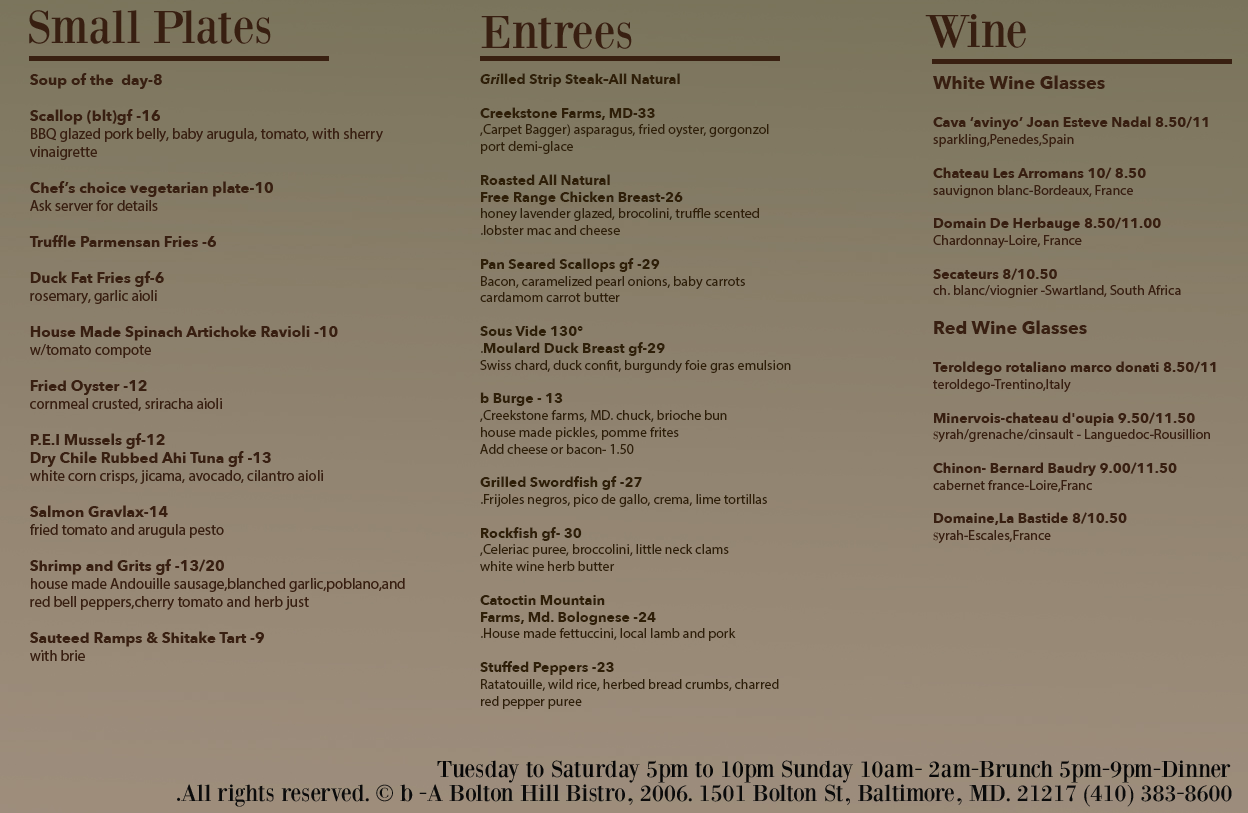
<style>
.page{position:relative;width:1248px;height:813px}
.page>*{position:absolute;margin:0}
.t1{font:48px "BodoniXT";color:#381f11}
.t2{font:15px "MyriadPro-Regular";color:#381f11}
.t3{font:15px "AvenirNext-Bold";color:#381f11}
.t4{font:14px "MyriadPro-Regular";color:#2f1f08}
.t5{font:14px "AvenirNext-BoldItalic";color:#2f1f08}
.t6{font:14px "AvenirNext-Bold";color:#2f1f08}
.t7{font:14px "MyriadPro-Regular";color:#381f11}
.t8{font:18px "AvenirNext-Bold";color:#381f11}
.t9{font:14px "AvenirNext-Bold";color:#381f11}
.t10{font:14px "BodoniXT";color:#381f11}
.t11{font:24px "BodoniXT";color:#070707}
.t12{font:24px "BodoniXT";color:#0b0b0b}
.t13{font:24px "MyriadPro-Regular";color:#0b0b0b}
</style>
<div class="page">
<p class="t1" style="left:29px;top:10px;width:242px;height:34px">Small Plates</p>
<p class="t1" style="left:481px;top:16px;width:151px;height:33px">Entrees</p>
<p class="t1" style="left:925px;top:14px;width:101px;height:34px">Wine</p>
<p class="t2" style="left:29px;top:73px;width:376px;height:588px;text-align:right"><span class="t3">Soup of the  day-8<br><br>Scallop (blt)gf -16</span> <br>BBQ glazed pork belly, baby arugula, tomato, with sherry <br>vinaigrette<br><br><span class="t3">Chef’s choice vegetarian plate-10</span> <br>Ask server for details<br> <br><span class="t3">Truffle Parmensan Fries -6<br> <br>Duck Fat Fries gf-6</span>  <br>rosemary, garlic aioli<br><br><span class="t3">House Made Spinach Artichoke Ravioli -10<br></span>w/tomato compote<br><br><span class="t3">Fried Oyster -12</span> <br>cornmeal crusted, sriracha aioli<br><br><span class="t3">P.E.I Mussels gf-12<br>Dry Chile Rubbed Ahi Tuna gf -13</span> <br>white corn crisps, jicama, avocado, cilantro aioli<br><span class="t3"><br>Salmon Gravlax-14</span> <br> fried tomato and arugula pesto<br><br><span class="t3">Shrimp and Grits gf -13/20<br></span>house made Andouille sausage,blanched garlic,poblano,and red bell peppers,cherry tomato and herb just<br><span class="t3"><br>Sauteed Ramps &amp; Shitake Tart -9<br></span>with brie</p>
<p class="t4" style="left:480px;top:73px;width:311px;height:636px;text-align:right"><span class="t5">Gri</span><span class="t6">lled Strip Steak–All Natural<br><br>Creekstone Farms, MD-33<br></span>   Carpet Bagger) asparagus, fried oyster, gorgonzol,<br>port demi-glace<br><span class="t6"><br>Roasted All Natural<br>Free Range Chicken Breast-26<br></span>honey lavender glazed, brocolini, truffle scented<br>lobster mac and cheese.<br><br><span class="t6">Pan Seared Scallops gf -29<br></span>Bacon, caramelized pearl onions, baby carrots<br>cardamom carrot butter<br><br><span class="t6">Sous Vide 130°<br>Moulard Duck Breast gf-29</span>.<br>Swiss chard, duck confit, burgundy foie gras emulsion<br><br><span class="t6">b Burge - 13</span>   <br>Creekstone farms, MD. chuck, brioche bun,<br>house made pickles, pomme frites<br>Add cheese or bacon- 1.50<br><br><span class="t6">Grilled Swordfish gf -27<br></span>Frijoles negros, pico de gallo, crema, lime tortillas.<br><br><span class="t6">Rockfish gf- 30</span> <br>Celeriac puree, broccolini, little neck clams,<br>white wine herb butter<br><br><span class="t6">Catoctin Mountain<br>Farms, Md. Bolognese -24<br></span>House made fettuccini, local lamb and pork.<br><br><span class="t6">Stuffed Peppers -23<br></span>Ratatouille, wild rice, herbed bread crumbs, charred<br>red pepper puree<br><br><br><br>.</p>
<p class="t7" style="left:933px;top:75px;width:283px;height:469px;text-align:right"><span class="t8">White Wine Glasses<br>   <br></span><span class="t9">Cava ‘avinyo’ Joan Esteve Nadal 8.50/11<br></span>sparkling,Penedes,Spain<br><br><span class="t9">Chateau Les Arromans 10/ 8.50<br></span>sauvignon blanc-Bordeaux, France<br><br><span class="t9">Domain De Herbauge 8.50/11.00<br></span>Chardonnay-Loire, France<br><br><span class="t9">Secateurs 8/10.50<br></span>ch. blanc/viognier -Swartland, South Africa<br><br><span class="t8">Red Wine Glasses<br><br></span><span class="t9">Teroldego rotaliano marco donati 8.50/11<br></span>teroldego-Trentino,Italy<br><span class="t9"><br>Minervois-chateau d'oupia 9.50/11.50<br></span><span class="t10">s</span>yrah/grenache/cinsault - Languedoc-Rousillion<br><br><span class="t9">Chinon- Bernard Baudry 9.00/11.50<br></span>cabernet france-Loire,Franc<br><span class="t9"><br>Domaine,La Bastide 8/10.50<br></span><span class="t10">s</span>yrah-Escales,France</p>
<p class="t11" style="left:437px;top:760px;width:794px;height:23px">Tuesday to Saturday 5pm to 10pm Sunday 10am- 2am-Brunch 5pm-9pm-Dinner</p>
<p class="t12" style="left:177px;top:784px;width:1055px;height:23px">All rights reserved. © b -A Bolton Hill Bistro, 2006. 1501 Bolton St, Baltimore, MD. 21217 (410) 383-8600<span class="t13">.</span></p>
</div>
